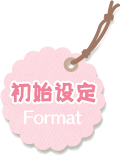
<style>
.page{position:relative;width:121px;height:156px;background:#ffffff}
.page>*{position:absolute;margin:0}
.t1{font:13.5px "shetumodengxiaofangti";color:#ef8299;font-weight:bold;scale:0.94 1}
</style>
<div class="page">
<p class="t1" style="left:11px;top:82px;width:85px;height:21px">初始设定</p>
</div>
